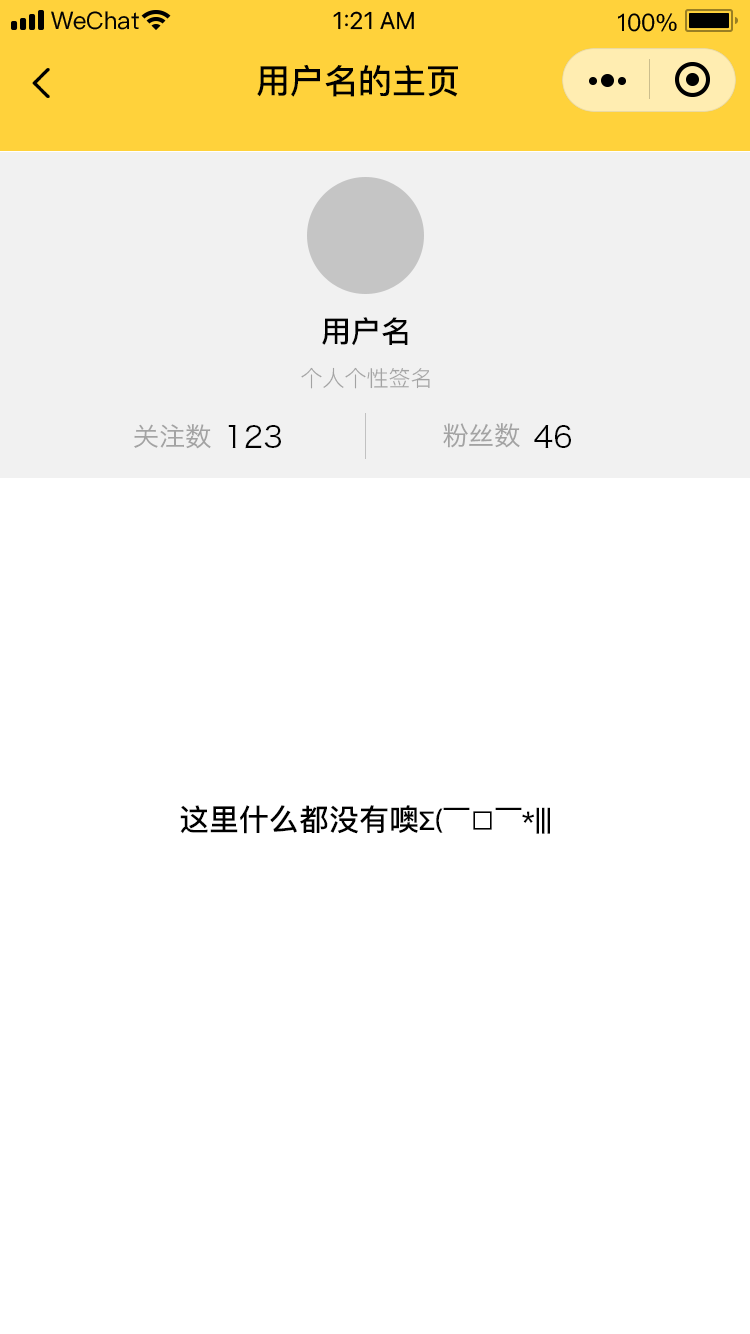
<style>
.page{position:relative;width:750px;height:1334px;background:#ffffff}
.page>*{position:absolute;margin:0}
.t1{font:34px "PingFang-SC-Bold";color:#000000}
.t2{font:30px "PingFang-SC-Bold";color:#000000}
.t3{font:22px "PingFang-SC-Regular";color:#a3a3a3}
.t4{font:26px "HiraginoSansGB-W3";color:#a3a3a3}
.t5{font:30px "HiraginoSansGB-W3";color:#000000}
.t6{font:26px "PingFang-SC-Bold";color:#000000}
</style>
<div class="page">
<p class="t1" style="left:257px;top:64px;width:201px;height:33px">用户名的主页</p>
<p class="t2" style="left:322px;top:317px;width:86px;height:29px">用户名</p>
<p class="t3" style="left:301px;top:367px;width:129px;height:22px">个人个性签名</p>
<p class="t4" style="left:134px;top:424px;width:77px;height:25px">关注数</p>
<p class="t5" style="left:228px;top:425px;width:53px;height:24px">123</p>
<p class="t4" style="left:443px;top:423px;width:77px;height:25px">粉丝数</p>
<p class="t5" style="left:534px;top:425px;width:37px;height:23px">46</p>
<p class="t6" style="left:180px;top:805px;width:370px;height:29px"><span class="t2">这里什么都没有噢</span>∑(￣□￣*|||</p>
</div>
